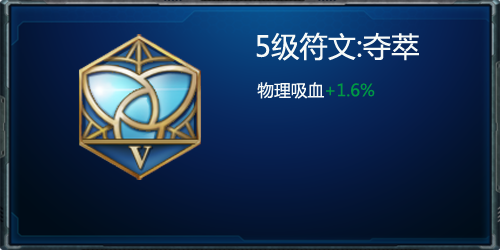
<style>
.page{position:relative;width:500px;height:250px}
.page>*{position:absolute;margin:0}
.t1{font:28.3px "MicrosoftYaHei";color:#f7faf8}
.t2{font:16.7px "MicrosoftYaHei";color:#f7faf8}
.t3{font:16.7px "MicrosoftYaHei";color:#009944}
</style>
<div class="page">
<p class="t1" style="left:256px;top:32px;width:163px;height:67px;text-align:center">5级符文:夺萃<br><span class="t2">        物理吸血</span><span class="t3">+1.6%</span></p>
</div>
